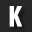
<style>
.page{position:relative;width:32px;height:32px;background:#272727}
.page>*{position:absolute;margin:0}
.t1{font:30px "MyriadPro-BoldCond";color:#ffffff}
</style>
<div class="page">
<p class="t1" style="left:9px;top:6px;width:13px;height:21px">K</p>
</div>
